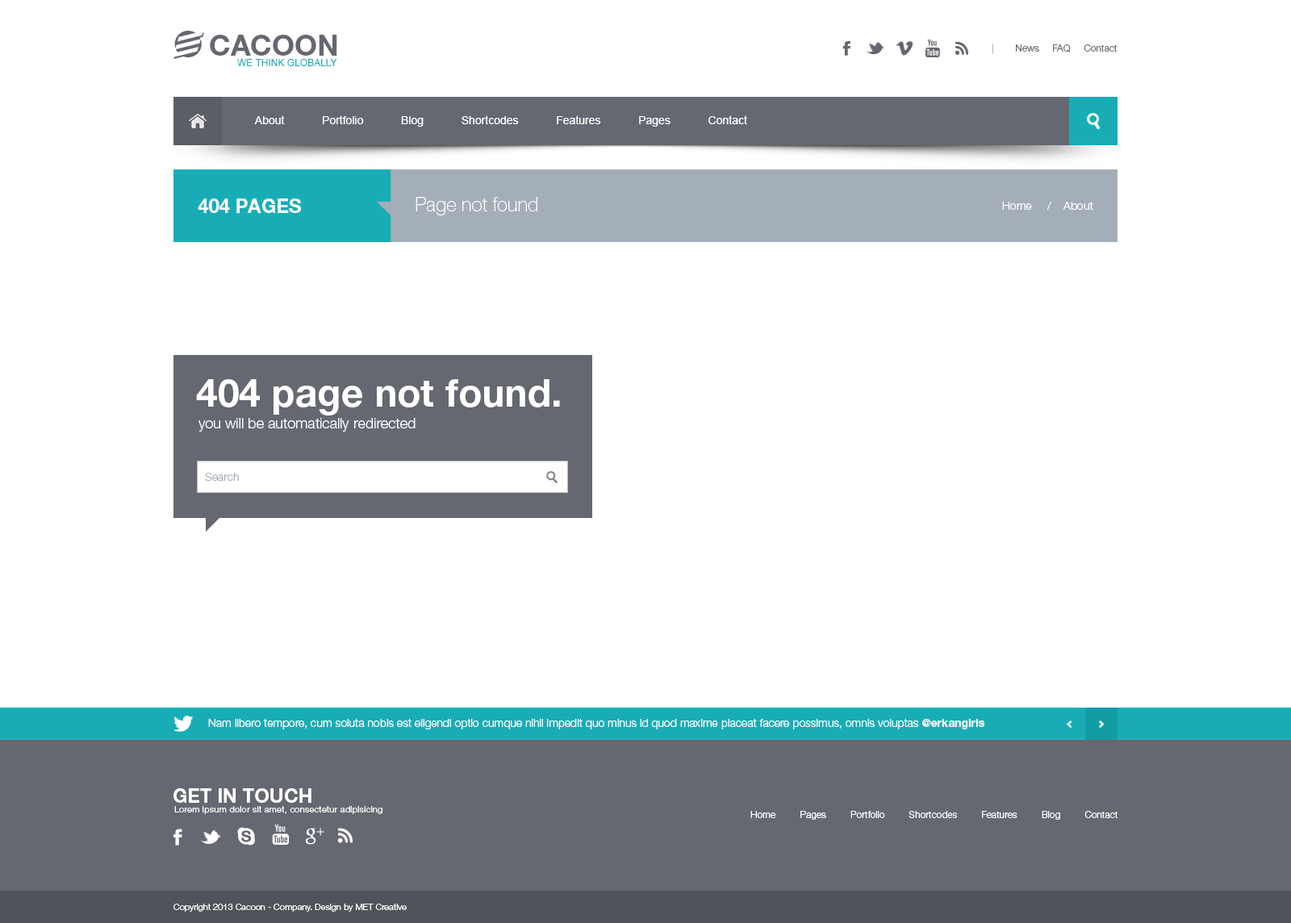
<style>
.page{position:relative;width:1291px;height:923px;background:#ffffff}
.page>*{position:absolute;margin:0}
.t1{font:29.1px "HelveticaNeueLTPro-Bd";color:#656870}
.t2{font:9.7px "HelveticaNeueLTPro-Lt";color:#656870}
.t3{font:9.7px "HelveticaNeueLTPro-Lt";color:#bec1c8}
.t4{font:9.7px "ArialMT";color:#18adb6}
.t5{font:11.3px "ArialMT";color:#ffffff}
.t6{font:19.4px "HelveticaNeueLTPro-Th";color:#ffffff}
.t7{font:19.4px "HelveticaNeueLTPro-Bd";color:#ffffff}
.t8{font:11.3px "HelveticaNeueLTPro-Lt";color:#ffffff}
.t9{font:38.7px "HelveticaNeueLTPro-Bd";color:#ffffff}
.t10{font:14.5px "HelveticaNeueLTPro-Lt";color:#ffffff}
.t11{font:11.3px "HelveticaNeueLTPro-Lt";color:#a4aeb9}
.t12{font:11.3px "HelveticaNeueLTPro-Bd";color:#ffffff}
.t13{font:8.9px "HelveticaNeueLTPro-Lt";letter-spacing:0.025em;color:#ffffff}
.t14{font:9.7px "HelveticaNeueLTPro-Lt";color:#ffffff}
.t15{font:8.9px "HelveticaNeueLTPro-Lt";color:#ffffff}
</style>
<div class="page">
<p class="t1" style="left:210px;top:35px;width:127px;height:21px">CACOON</p>
<p class="t2" style="left:992px;top:44px;width:125px;height:10px"><span class="t3">|</span>        News     FAQ     Contact</p>
<p class="t4" style="left:237px;top:59px;width:100px;height:7px">WE THINK GLOBALLY</p>
<p class="t5" style="left:254px;top:115px;width:493px;height:12px">About            Portfolio            Blog            Shortcodes            Features            Pages            Contact</p>
<p class="t6" style="left:416px;top:197px;width:122px;height:19px">Page not found</p>
<p class="t7" style="left:198px;top:199px;width:103px;height:14px">404 PAGES</p>
<p class="t8" style="left:1002px;top:202px;width:92px;height:8px">Home     /    About</p>
<p class="t9" style="left:196px;top:379px;width:364px;height:37px">404 page not found.</p>
<p class="t10" style="left:199px;top:418px;width:217px;height:14px">you will be automatically redirected</p>
<p class="t11" style="left:205px;top:473px;width:34px;height:8px">Search</p>
<p class="t8" style="left:208px;top:719px;width:777px;height:11px">Nam libero tempore, cum soluta nobis est eligendi optio cumque nihil impedit quo minus id quod maxime placeat facere possimus, omnis voluptas <span class="t12">@erkangiris</span></p>
<p class="t7" style="left:174px;top:789px;width:138px;height:14px">GET IN TOUCH</p>
<p class="t13" style="left:174px;top:806px;width:209px;height:8px">Lorem ipsum dolor sit amet, consectetur adipisicing</p>
<p class="t14" style="left:751px;top:811px;width:367px;height:9px">Home         Pages         Portfolio         Shortcodes         Features         Blog         Contact</p>
<p class="t15" style="left:174px;top:904px;width:233px;height:8px">Copyright 2013 Cacoon - Company. Design by MET Creative</p>
</div>
